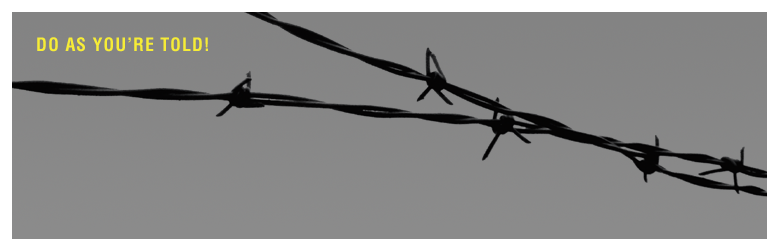
<style>
.page{position:relative;width:779px;height:251px}
.page>*{position:absolute;margin:0}
.t1{font:18px "Helvetica-Condensed-Bold";letter-spacing:0.05em;color:#f6ec36}
</style>
<div class="page">
<p class="t1" style="left:37px;top:37px;width:171px;height:15px">DO AS YOU’RE TOLD!</p>
</div>
